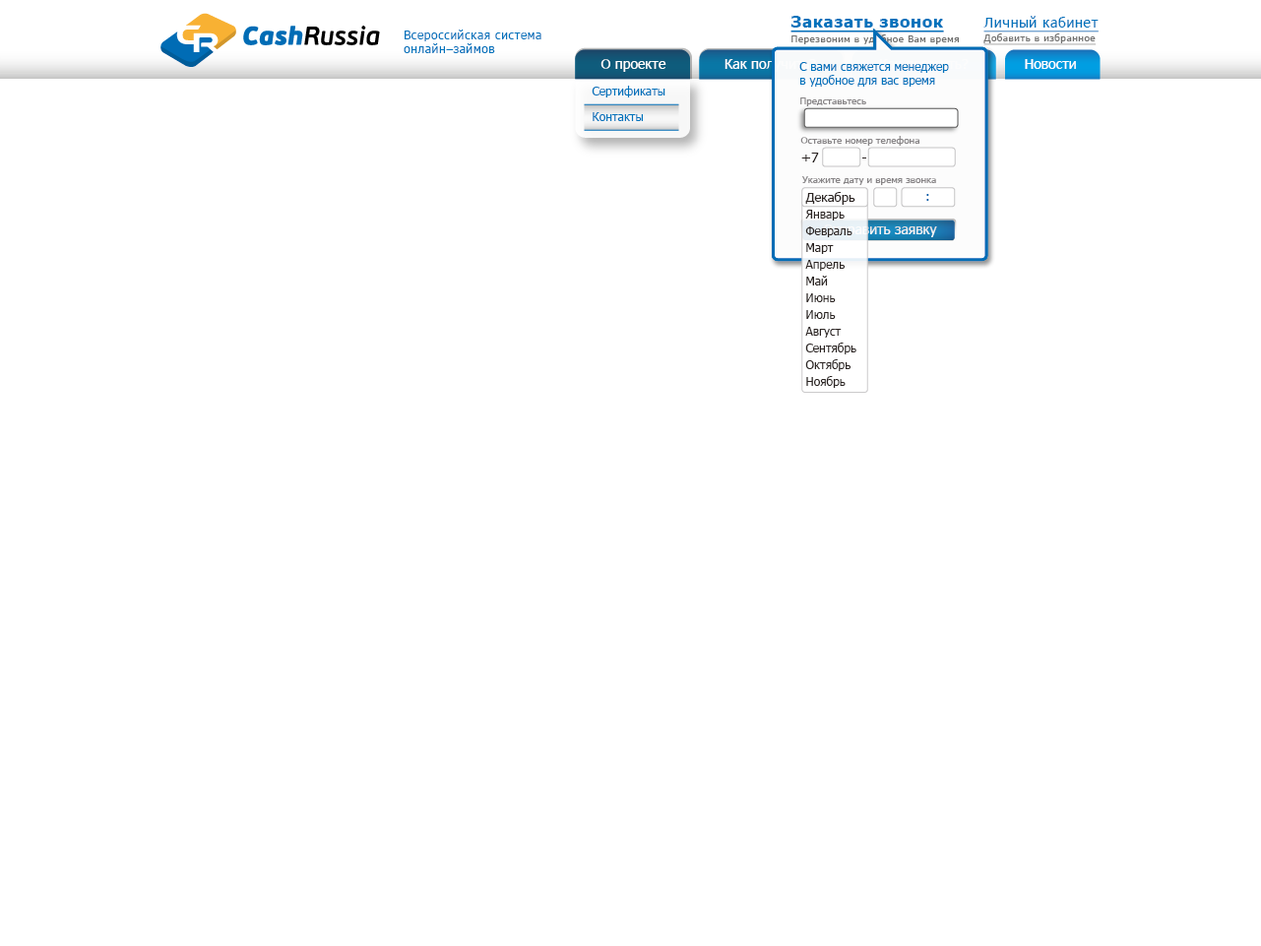
<style>
.page{position:relative;width:1261px;height:946px;background:#ffffff}
.page>*{position:absolute;margin:0}
.t1{font:16.4px "Tahoma-Bold";letter-spacing:0.05em;color:#0073bc;text-decoration:underline}
.t2{font:13.8px "Tahoma";letter-spacing:0.05em;color:#0073bc;text-decoration:underline}
.t3{font:11.8px/14.5px "Tahoma";letter-spacing:0.05em;color:#0073bc}
.t4{font:9.8px "Tahoma";letter-spacing:0.05em;color:#6f6f6e}
.t5{font:9.8px "Tahoma";letter-spacing:0.05em;color:#6f6f6e;text-decoration:underline}
.t6{font:13.8px "Tahoma";color:#ffffff}
.t7{font:11.8px/13.8px "Tahoma";color:#0073bc}
.t8{font:11.8px/25.6px "Tahoma";color:#0073bc}
.t9{font:9.8px "Tahoma";color:#878486}
.t10{font:13.8px "Tahoma";color:#2b2422}
.t11{font:11.8px/16.7px "Tahoma";color:#2b2422}
.t12{font:12.8px/16.7px "Tahoma";color:#2b2422}
.t13{font:13.8px "PTSans-Caption";color:#005daa}
</style>
<div class="page">
<p class="t1" style="left:790px;top:16px;width:154px;height:16px">Заказать звонок</p>
<p class="t2" style="left:983px;top:16px;width:115px;height:16px">Личный кабинет</p>
<p class="t3" style="left:404px;top:30px;width:137px;height:23px">Всероссийская система<br>онлайн–займов</p>
<p class="t4" style="left:791px;top:34px;width:168px;height:10px">Перезвоним в удобное Вам время</p>
<p class="t5" style="left:983px;top:33px;width:113px;height:12px">Добавить в избранное</p>
<p class="t6" style="left:600px;top:59px;width:66px;height:13px">О проекте</p>
<p class="t6" style="left:724px;top:59px;width:92px;height:13px">Как получить?</p>
<p class="t7" style="left:799px;top:62px;width:150px;height:25px">С вами свяжется менеджер <br>в удобное для вас время</p>
<p class="t6" style="left:1025px;top:59px;width:51px;height:10px">Новости</p>
<p class="t8" style="left:592px;top:86px;width:73px;height:35px">Сертификаты<br>Контакты</p>
<p class="t9" style="left:800px;top:97px;width:66px;height:9px">Представьтесь</p>
<p class="t9" style="left:800px;top:136px;width:119px;height:10px">Оставьте номер телефона</p>
<p class="t10" style="left:801px;top:153px;width:18px;height:9px">+7</p>
<p class="t9" style="left:802px;top:176px;width:134px;height:9px">Укажите дату и время звонка</p>
<p class="t11" style="left:805px;top:192px;width:51px;height:196px"><span class="t12">Декабрь<br></span>Январь<br>Февраль<br>Март<br>Апрель<br>Май<br>Июнь<br>Июль<br>Август<br>Сентябрь<br>Октябрь<br>Ноябрь</p>
<p class="t13" style="left:926px;top:194px;width:3px;height:7px">:</p>
<p class="t6" style="left:823px;top:224px;width:114px;height:13px">Отправить заявку</p>
</div>
